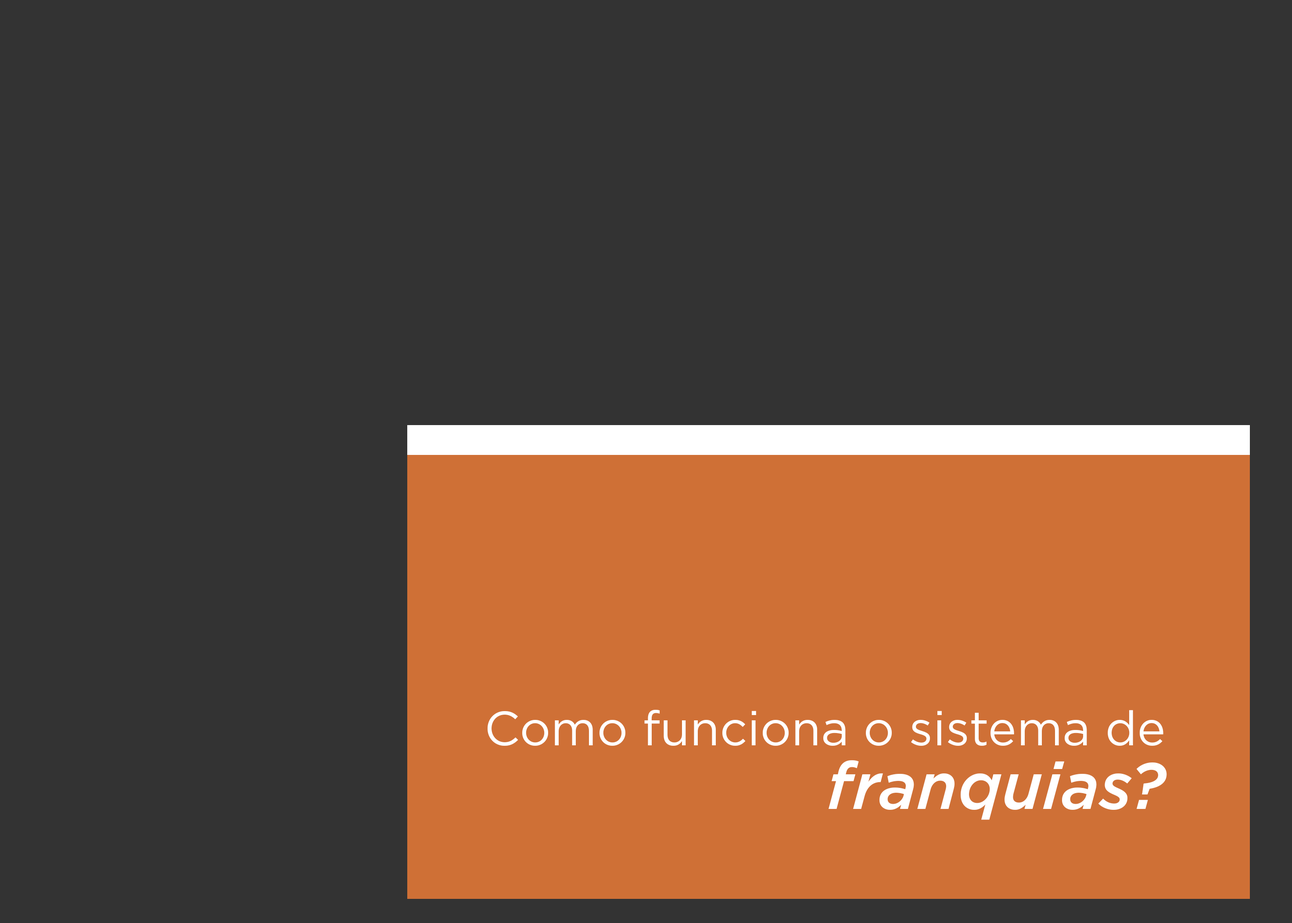
<style>
.page{position:relative;width:1292px;height:923px;background:#333333}
.page>*{position:absolute;margin:0}
.t1{font:48.3px/63.6px "Gotham-Book";color:#ffffff}
.t2{font:65.8px/63.6px "Gotham-MediumItalic";color:#ffffff}
</style>
<div class="page">
<p class="t1" style="left:487px;top:710px;width:680px;height:110px;text-align:right">Como funciona o sistema de<br><span class="t2">franquias?</span></p>
</div>
